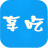
<style>
.page{position:relative;width:48px;height:48px;background:#0b9ef2}
.page>*{position:absolute;margin:0}
.t1{font:18.4px "Pop3EG-Bold-T-GB";color:#fffff2;font-weight:bold;scale:1.2 1}
</style>
<div class="page">
<p class="t1" style="left:2px;top:15px;width:42px;height:17px">享吃</p>
</div>
